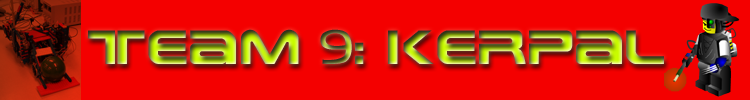
<style>
.page{position:relative;width:750px;height:100px;background:#f40000}
.page>*{position:absolute;margin:0}
.t1{font:48px "EarthNormal"}
.t2{font:48px "Koshgarian-Ligh"}
</style>
<div class="page">
<p class="t1" style="left:88px;top:29px;width:576px;height:35px">Team <span class="t2">9</span>: kerpal</p>
</div>
